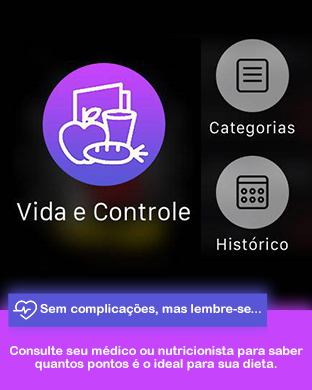
<style>
.page{position:relative;width:312px;height:390px;background:#010101}
.page>*{position:absolute;margin:0}
.t1{font:12.5px "ArialRoundedMTBold";color:#ffffff}
.t2{font:12.5px/13.4px "ArialRoundedMTBold";color:#ffffff}
</style>
<div class="page">
<p class="t1" style="left:40px;top:303px;width:221px;height:13px">Sem complicações, mas lembre-se...</p>
<p class="t2" style="left:10px;top:346px;width:293px;height:25px;text-align:center">Consulte seu médico ou nutricionista para saber<br>quantos pontos é o ideal para sua dieta.</p>
</div>
